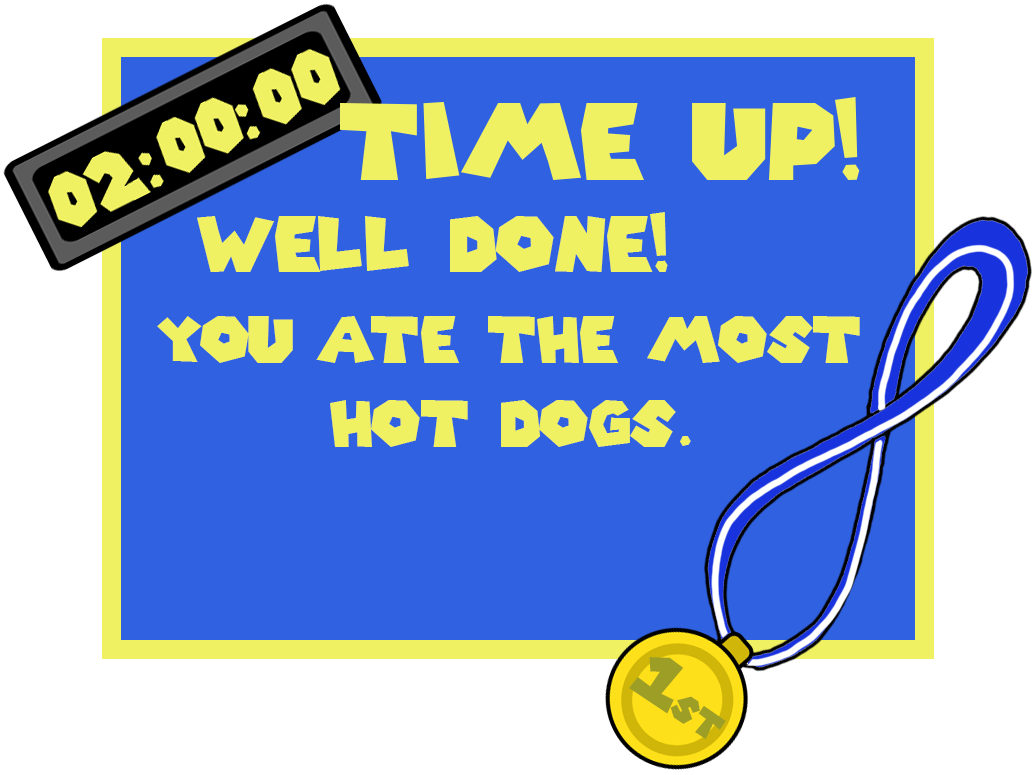
<style>
.page{position:relative;width:1035px;height:775px;background:#2f61e1}
.page>*{position:absolute;margin:0}
.t1{font:75px "SuperMarioGalaxy";color:#eff163}
.t2{font:62.5px/83.5px "SuperMarioGalaxy";color:#eff163}
.t3{font:36.1px "SuperMarioGalaxy";color:#9d9e26}
.t4{font:64.4px "SuperMarioGalaxy";color:#9d9e26}
</style>
<div class="page">
<p class="t1" style="left:197px;top:212px;width:471px;height:60px">Well done!</p>
<p class="t2" style="left:157px;top:316px;width:703px;height:131px;text-align:center">you ate the most<br>hot dogs.</p>
<p class="t3" style="left:629px;top:657px;width:97px;height:83px;rotate:34deg"><span class="t4">1</span>st</p>
</div>
